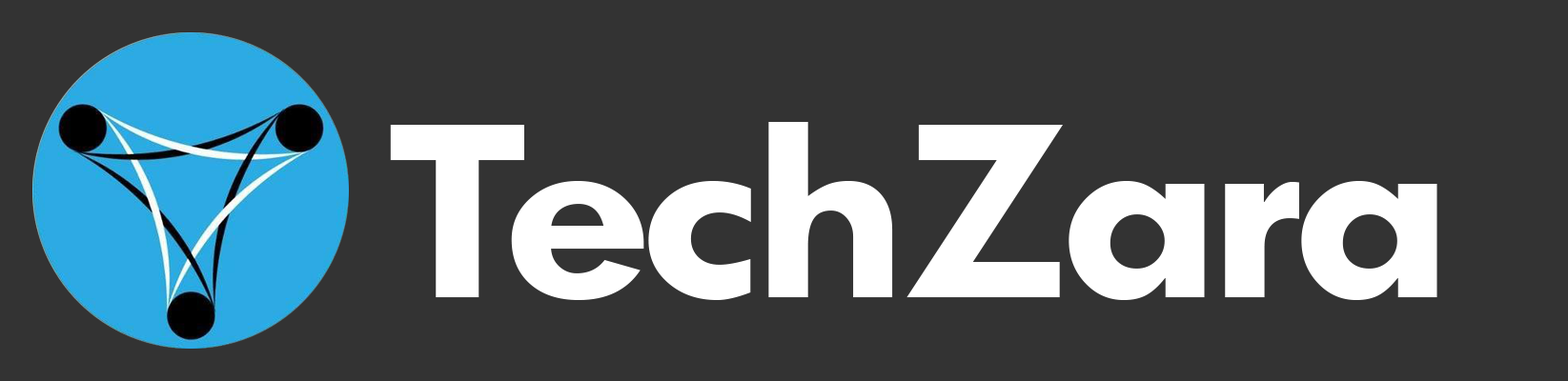
<style>
.page{position:relative;width:1568px;height:381px;background:#333333}
.page>*{position:absolute;margin:0}
.t1{font:269.5px "TwCenMT-Bold";letter-spacing:-0.05em;color:#ffffff;scale:1.15 1}
</style>
<div class="page">
<p class="t1" style="left:390px;top:122px;width:1047px;height:178px">TechZara</p>
</div>
